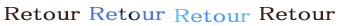
<style>
.page{position:relative;width:340px;height:26px;background:#ffffff}
.page>*{position:absolute;margin:0}
.t1{font:19px "MS-PMincho";color:#342016;font-weight:bold;scale:1.37 1}
.t2{font:19px "MS-PMincho";color:#4978d8;font-weight:bold;scale:1.37 1}
.t3{font:19px "MS-PMincho";font-weight:bold;scale:1.37 1}
</style>
<div class="page">
<p class="t1" style="left:4px;top:7px;width:76px;height:14px">Retour</p>
<p class="t2" style="left:89px;top:7px;width:76px;height:14px">Retour</p>
<p class="t3" style="left:174px;top:9px;width:76px;height:14px">Retour</p>
<p class="t1" style="left:259px;top:7px;width:76px;height:14px">Retour</p>
</div>
